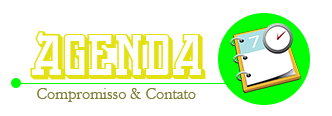
<style>
.page{position:relative;width:332px;height:116px;background:#ffffff}
.page>*{position:absolute;margin:0}
.t1{font:45.2px "BackOnLime";color:#e4e211}
.t2{font:16px "BaskOldFace";color:#7f7e34}
</style>
<div class="page">
<p class="t1" style="left:30px;top:31px;width:176px;height:49px">Agenda</p>
<p class="t2" style="left:37px;top:88px;width:159px;height:14px">Compromisso &amp; Contato</p>
</div>
